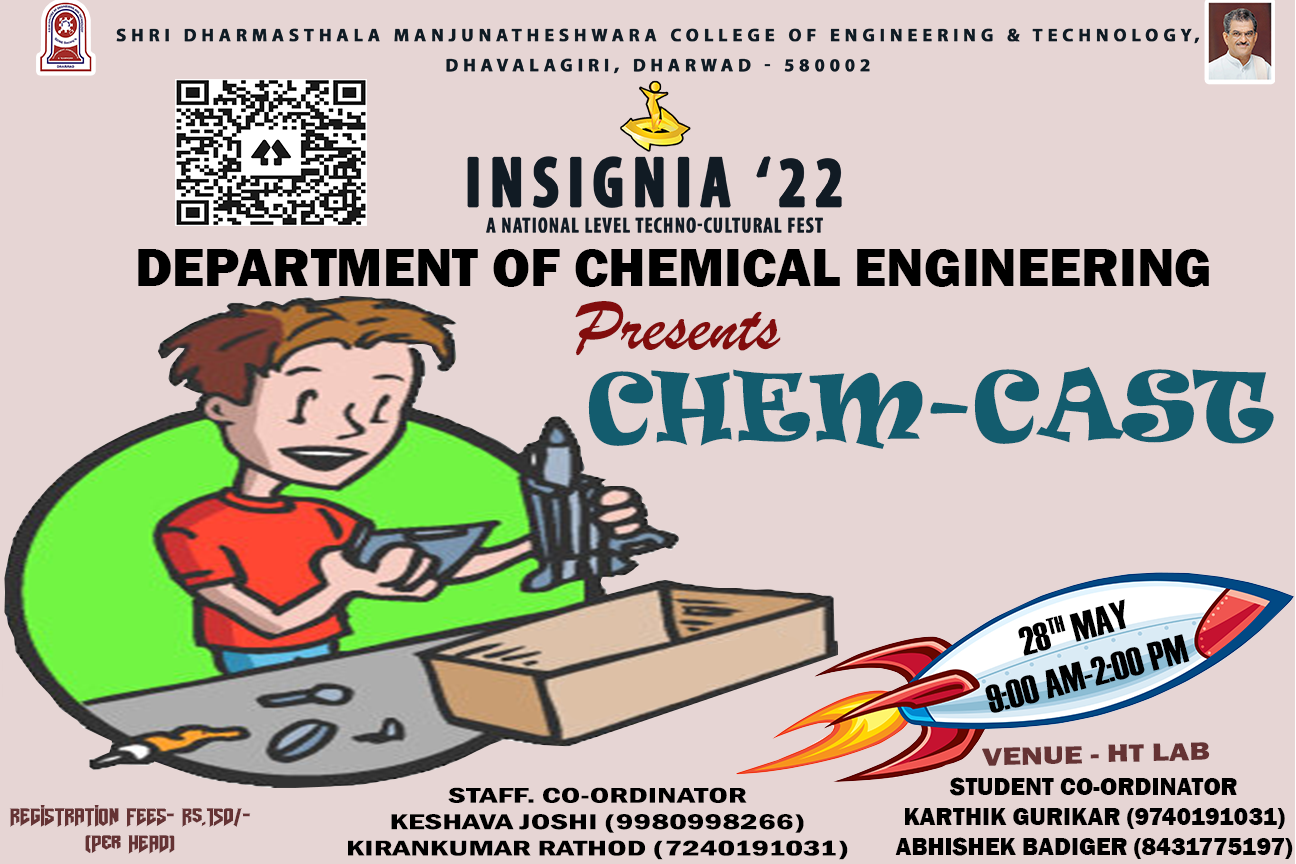
<style>
.page{position:relative;width:1296px;height:864px;background:#e6d5d4}
.page>*{position:absolute;margin:0}
.t1{font:55px "FranklinGothic-Heavy";color:#000000}
.t2{font:75px "BrushScriptMT";color:#820d0d}
.t3{font:90px "Ravie";color:#135c6e}
.t4{font:40px "Haettenschweiler";color:#000000}
.t5{font:26px "FranklinGothic-Heavy";color:#653334;scale:1.23 1}
.t6{font:25px "FranklinGothic-Heavy";color:#000000}
.t7{font:22px "FranklinGothic-DemiCond";color:#000000;scale:1.58 1}
.t8{font:23px "AmazDooMLeft";color:#653334;scale:1.32 1}
</style>
<div class="page">
<p class="t1" style="left:138px;top:249px;width:1071px;height:38px">DEPARTMENT OF CHEMICAL ENGINEERING</p>
<p class="t2" style="left:575px;top:301px;width:206px;height:55px">Presents</p>
<p class="t3" style="left:588px;top:366px;width:686px;height:83px">CHEM-CAST</p>
<p class="t4" style="left:985px;top:599px;width:205px;height:114px;text-align:center;rotate:-15deg">28TH MAY<br>9:00 AM-2:00 PM</p>
<p class="t5" style="left:982px;top:742px;width:228px;height:24px;rotate:-2deg">VENUE - HT LAB</p>
<p class="t6" style="left:895px;top:777px;width:398px;height:82px;text-align:center">STUDENT CO-ORDINATOR<br>KARTHIK GURIKAR (9740191031)<br>ABHISHEK BADIGER (8431775197)</p>
<p class="t7" style="left:348px;top:787px;width:500px;height:73px;text-align:center">STAFF. CO-ORDINATOR<br>KESHAVA JOSHI (9980998266)<br>KIRANKUMAR RATHOD (7240191031)</p>
<p class="t8" style="left:9px;top:805px;width:242px;height:49px;text-align:center">REGISTRATION FEES- Rs.150/-<br>(Per HEAD)</p>
</div>
